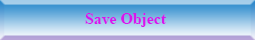
<style>
.page{position:relative;width:255px;height:40px}
.page>*{position:absolute;margin:0}
.t1{font:15.8px "TimesNewRomanPS-BoldMT";color:#d815ed}
</style>
<div class="page">
<p class="t1" style="left:85px;top:13px;width:81px;height:14px">Save Object</p>
</div>
